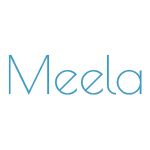
<style>
.page{position:relative;width:150px;height:150px;background:#ffffff}
.page>*{position:absolute;margin:0}
.t1{font:52px "PoiretOne-Regular";color:#3d9ac3}
</style>
<div class="page">
<p class="t1" style="left:8px;top:54px;width:134px;height:41px">Meela</p>
</div>
